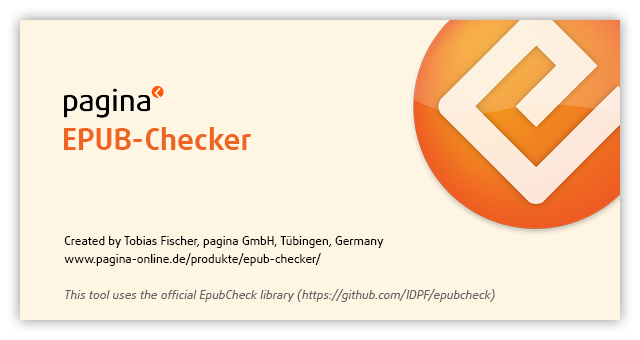
<style>
.page{position:relative;width:640px;height:340px;background:#fff5e3}
.page>*{position:absolute;margin:0}
.t1{font:30px "DaxlineOffc-Bold";color:#ee6522}
.t2{font:12px/18px "DaxlineOffc";color:#000000}
.t3{font:12px/18px "DaxlineOffc-Italic";color:#636363}
</style>
<div class="page">
<p class="t1" style="left:64px;top:127px;width:187px;height:23px">EPUB-Checker</p>
<p class="t2" style="left:64px;top:236px;width:431px;height:66px">Created by Tobias Fischer, pagina GmbH, Tübingen, Germany<br>www.pagina-online.de/produkte/epub-checker/<br><br><span class="t3">This tool uses the official EpubCheck library (https://github.com/IDPF/epubcheck)</span></p>
</div>
